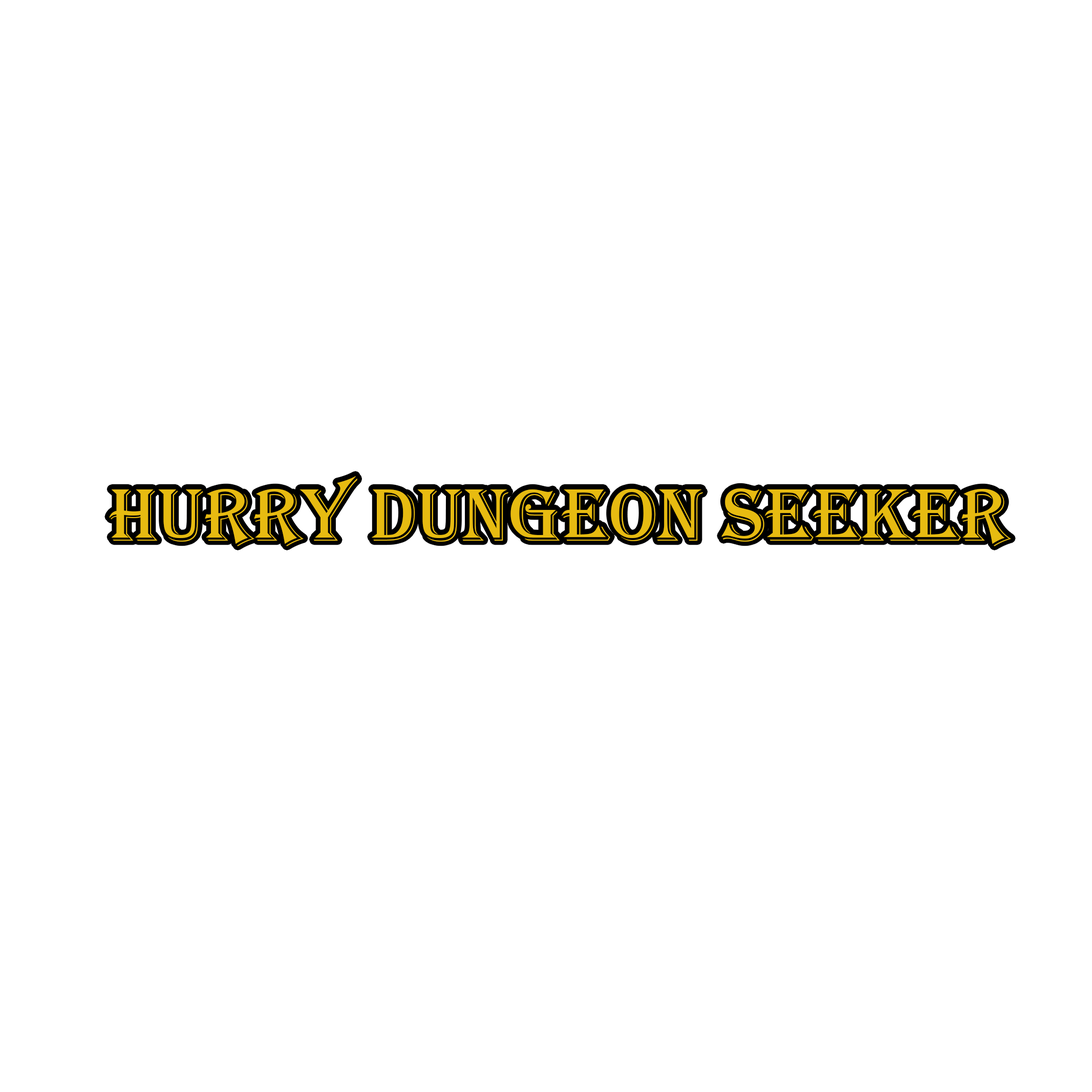
<style>
.page{position:relative;width:1092px;height:1092px;background:#ffffff}
.page>*{position:absolute;margin:0}
.t1{font:76.8px "Algerian";color:#e7bb11}
</style>
<div class="page">
<p class="t1" style="left:109px;top:476px;width:902px;height:70px">HURRY DUNGEON SEEKER</p>
</div>
